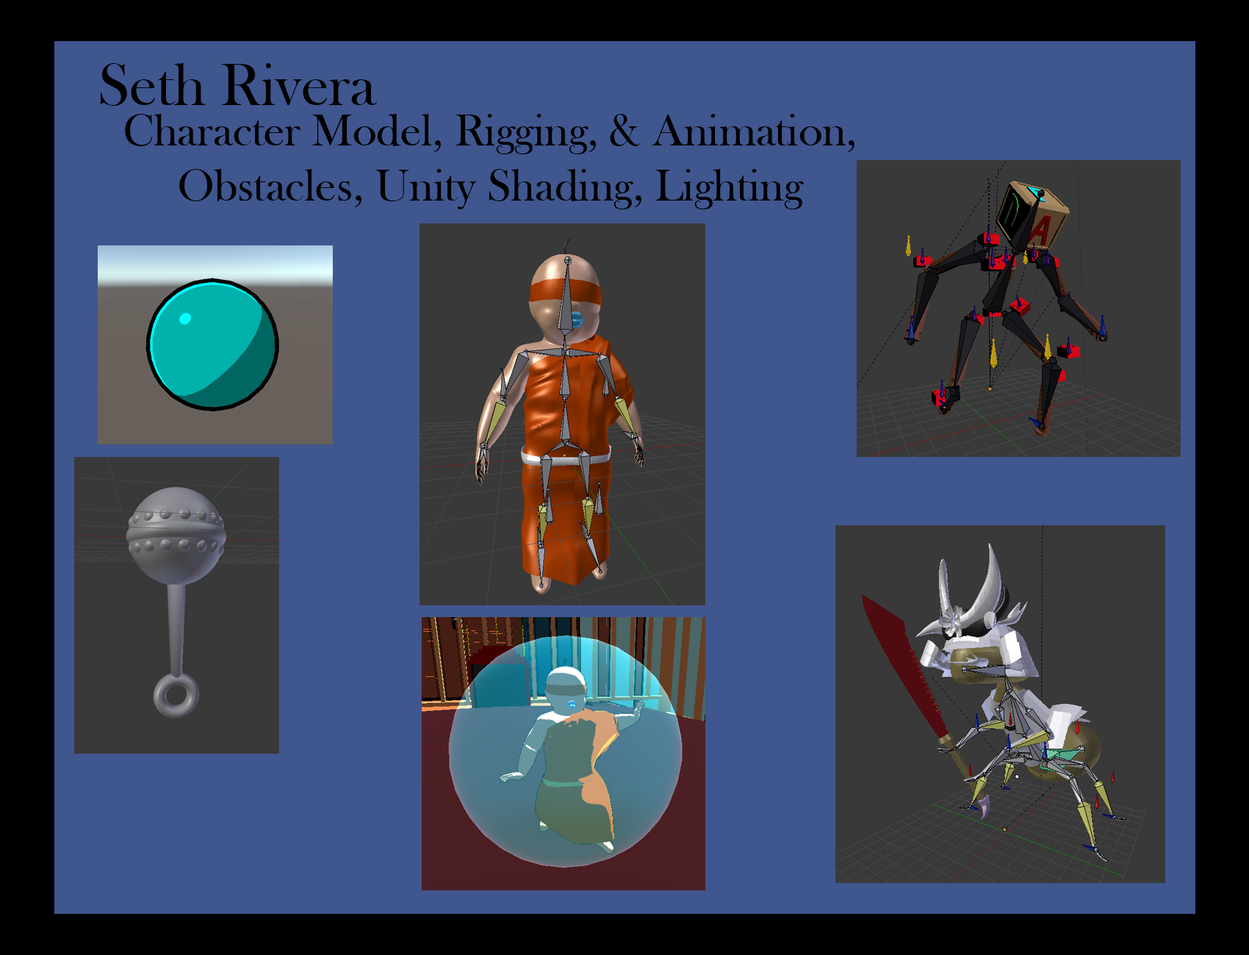
<style>
.page{position:relative;width:1249px;height:955px;background:#40568e}
.page>*{position:absolute;margin:0}
.t1{font:61.5px "BaskOldFace";color:#000000}
.t2{font:45.9px "BaskOldFace";color:#000000}
</style>
<div class="page">
<p class="t1" style="left:100px;top:63px;width:277px;height:43px">Seth Rivera</p>
<p class="t2" style="left:125px;top:114px;width:729px;height:95px;text-align:center">Character Model, Rigging, &amp; Animation, Obstacles, Unity Shading, Lighting</p>
</div>
